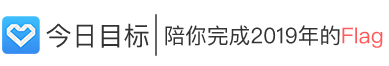
<style>
.page{position:relative;width:389px;height:66px;background:#ffffff}
.page>*{position:absolute;margin:0}
.t1{font:26px "PingFangSC-Regular";color:#333333}
.t2{font:21.6px "PingFangSC-Regular";color:#333333}
.t3{font:21.6px "PingFangSC-Regular";color:#ff5959}
</style>
<div class="page">
<p class="t1" style="left:46px;top:23px;width:103px;height:25px">今日目标</p>
<p class="t2" style="left:165px;top:25px;width:218px;height:23px">陪你完成2019年的<span class="t3">Flag</span></p>
</div>
